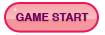
<style>
.page{position:relative;width:105px;height:35px;background:#ffffff}
.page>*{position:absolute;margin:0}
.t1{font:11.1px "Helvetica-Bold";color:#630460}
</style>
<div class="page">
<p class="t1" style="left:16px;top:13px;width:73px;height:8px">GAME START</p>
</div>
